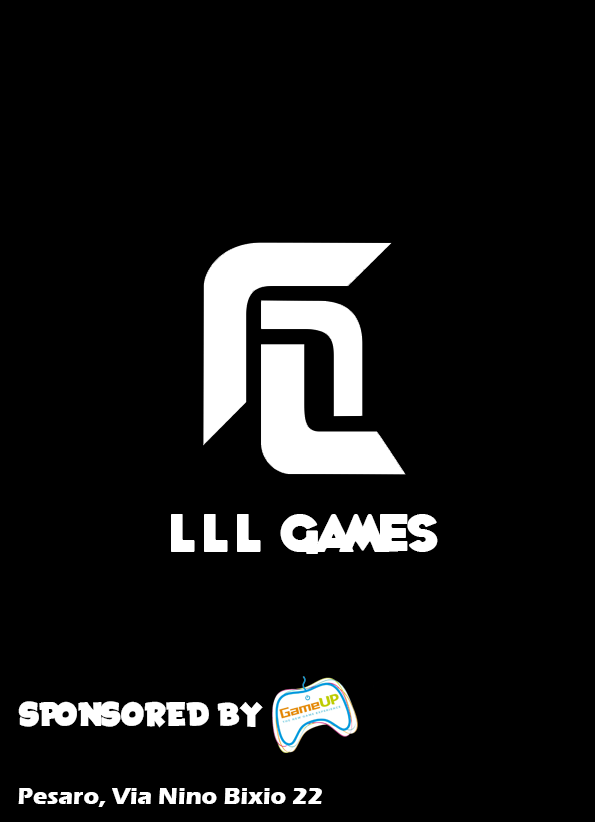
<style>
.page{position:relative;width:595px;height:822px;background:#000000}
.page>*{position:absolute;margin:0}
.t1{font:48px "WhoopAss";color:#ffffff}
.t2{font:18px "SpaceComics";color:#ffffff}
.t3{font:24px "ErasITC-Bold";color:#ffffff}
</style>
<div class="page">
<p class="t1" style="left:171px;top:514px;width:267px;height:40px">L L l  Games</p>
<p class="t2" style="left:18px;top:701px;width:245px;height:27px">SPONSORED BY</p>
<p class="t3" style="left:18px;top:788px;width:304px;height:19px">Pesaro, Via Nino Bixio 22</p>
</div>
